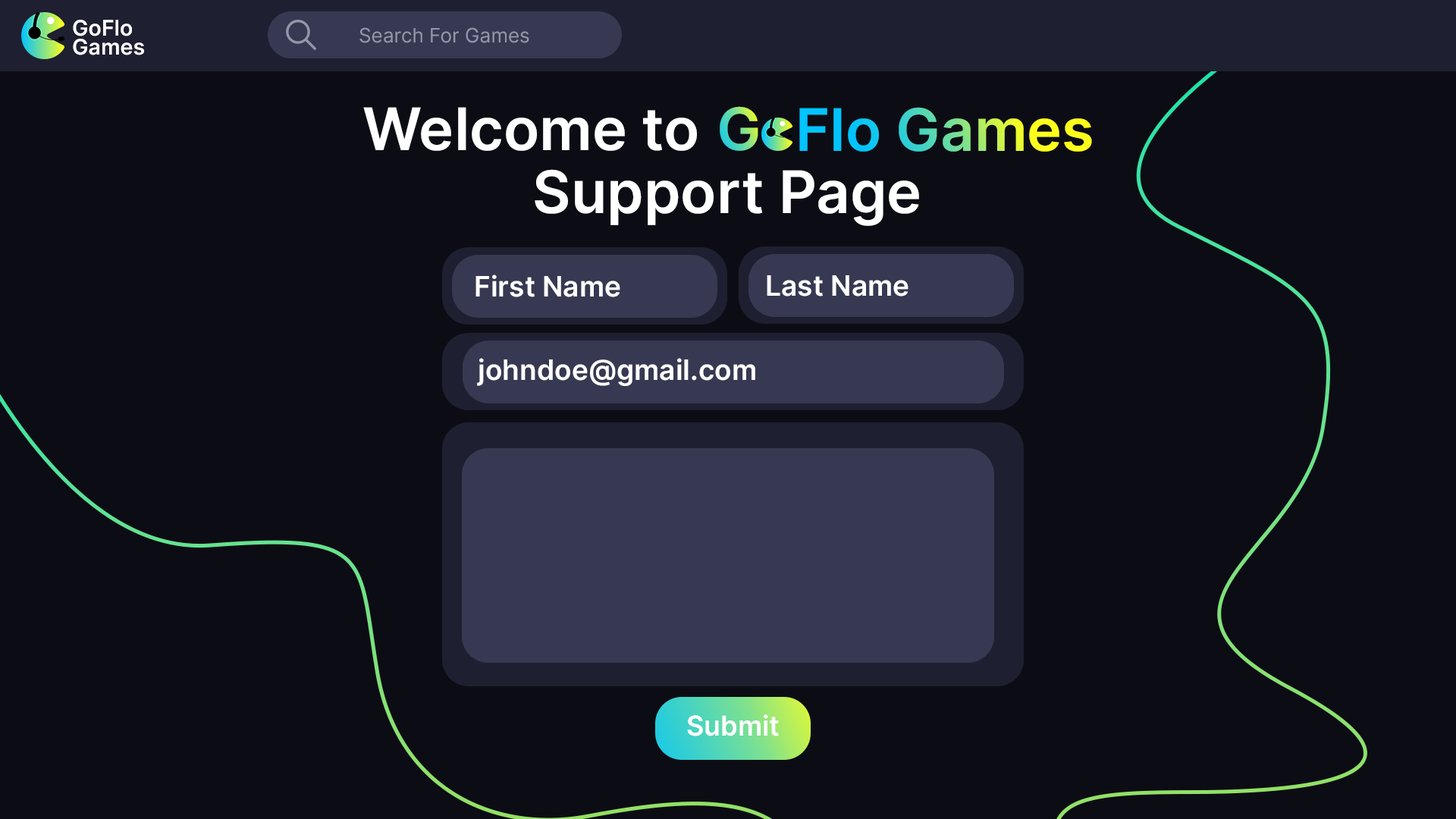
<style>
.page{position:relative;width:1456px;height:819px;background:#0c0d14}
.page>*{position:absolute;margin:0}
.t1{font:21.7px/19.1px "Inter-SemiBold";color:#fefeff}
.t2{font:19.9px "Inter-Regular";color:#9397a9}
.t3{font:58.8px "Inter-SemiBold";color:#ffffff}
.t4{font:58.8px "Inter-SemiBold"}
.t5{font:28.2px "Inter-SemiBold";color:#ffffff}
.t6{font:27.6px "Inter-SemiBold";color:#ffffff}
</style>
<div class="page">
<p class="t1" style="left:73px;top:20px;width:71px;height:35px">GoFlo<br>Games</p>
<p class="t2" style="left:359px;top:27px;width:170px;height:16px">Search For Games</p>
<p class="t3" style="left:363px;top:107px;width:334px;height:44px">Welcome to</p>
<p class="t4" style="left:720px;top:106px;width:38px;height:45px">G</p>
<p class="t4" style="left:799px;top:107px;width:293px;height:45px">Flo Games</p>
<p class="t3" style="left:535px;top:169px;width:384px;height:57px">Support Page</p>
<p class="t5" style="left:475px;top:275px;width:145px;height:22px">First Name</p>
<p class="t5" style="left:767px;top:275px;width:141px;height:22px">Last Name</p>
<p class="t5" style="left:477px;top:358px;width:278px;height:28px">johndoe@gmail.com</p>
<p class="t6" style="left:687px;top:714px;width:92px;height:22px">Submit</p>
</div>
